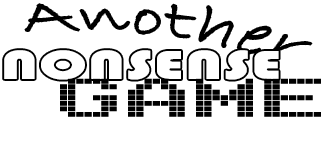
<style>
.page{position:relative;width:322px;height:160px;background:#ffffff}
.page>*{position:absolute;margin:0}
.t1{font:45.8px "BradleyHandITC";letter-spacing:0.025em;color:#000000;scale:1.69 1}
.t2{font:41.7px "Bauhaus93";letter-spacing:0.025em;color:#ffffff;scale:1.5 1}
.t3{font:83.3px "Arcade";letter-spacing:0.025em;color:#000000;scale:1.5 1}
</style>
<div class="page">
<p class="t1" style="left:25px;top:4px;width:287px;height:56px;rotate:12deg">Another</p>
<p class="t2" style="left:4px;top:50px;width:275px;height:30px">NONSENSE</p>
<p class="t3" style="left:60px;top:78px;width:261px;height:39px">GAME</p>
</div>
